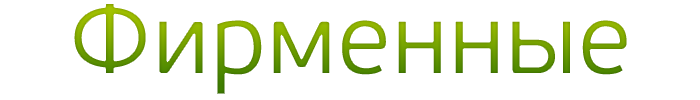
<style>
.page{position:relative;width:700px;height:100px;background:#ffffff}
.page>*{position:absolute;margin:0}
.t1{font:101px "PFBeauSansPro-Regular"}
</style>
<div class="page">
<p class="t1" style="left:73px;top:3px;width:555px;height:92px">Фирменные</p>
</div>
